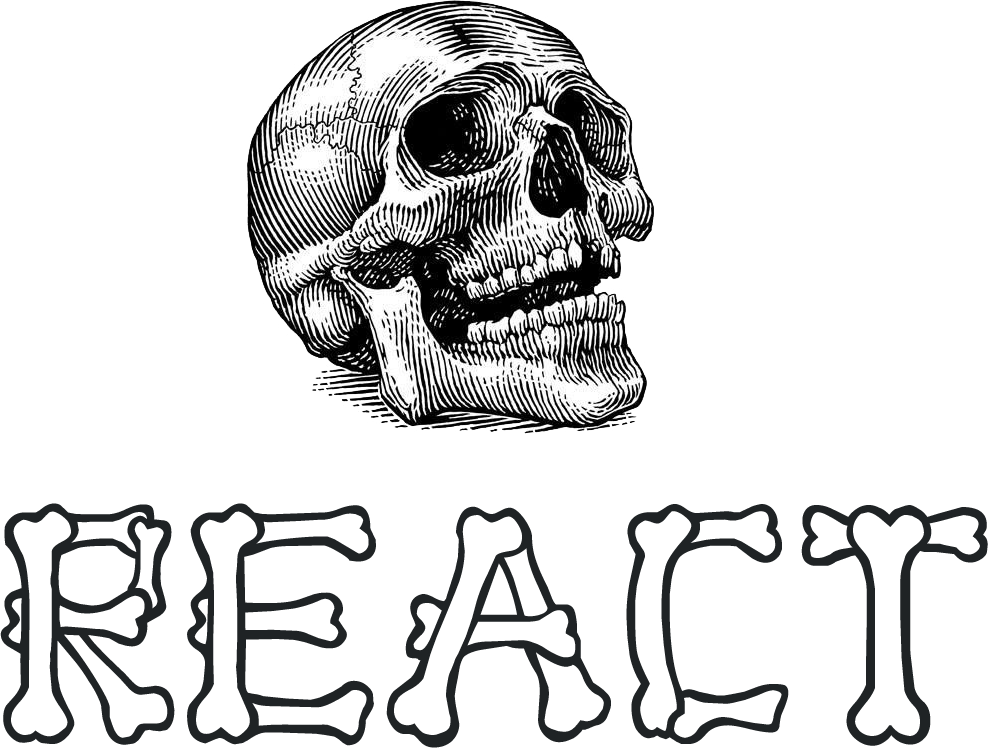
<style>
.page{position:relative;width:988px;height:748px;background:#ffffff}
.page>*{position:absolute;margin:0}
.t1{font:300px "BoneApart";color:#1f2325;font-weight:bold}
</style>
<div class="page">
<p class="t1" style="left:0px;top:503px;width:988px;height:245px">REACT</p>
</div>
